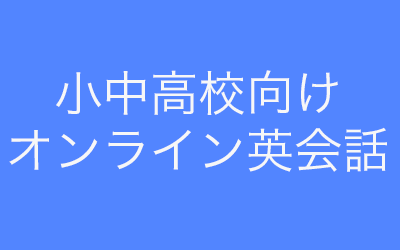
<style>
.page{position:relative;width:400px;height:250px;background:#5285ff}
.page>*{position:absolute;margin:0}
.t1{font:48px "HiraKakuProN-W3";color:#f7f7f7}
</style>
<div class="page">
<p class="t1" style="left:9px;top:70px;width:378px;height:102px;text-align:center">小中高校向け<br>オンライン英会話</p>
</div>
